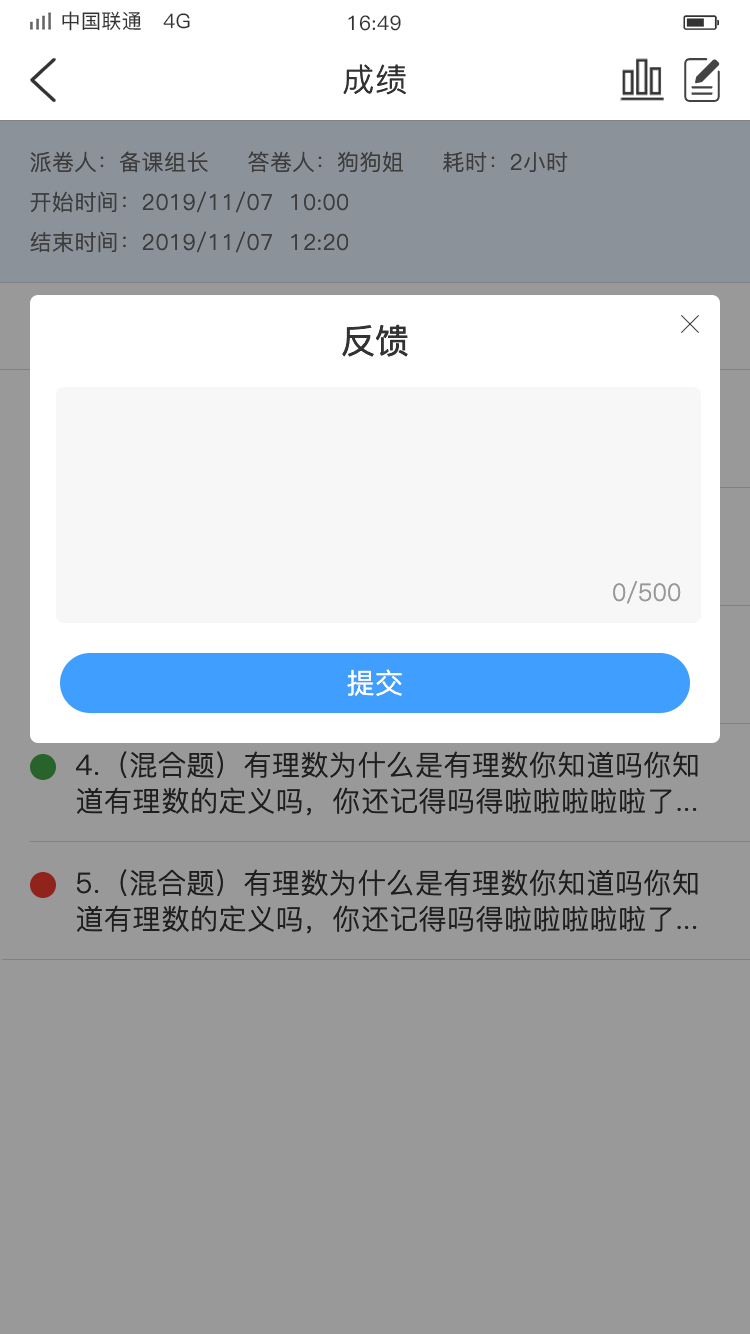
<style>
.page{position:relative;width:750px;height:1334px;background:#999999}
.page>*{position:absolute;margin:0}
.t1{font:20px "PingFang-SC-Medium";letter-spacing:0.02em;color:#333333}
.t2{font:32px "PingFang-SC-Regular";letter-spacing:0.02em;color:#333333}
.t3{font:22px "PingFang-SC-Regular";letter-spacing:0.02em;color:#3d3d3d}
.t4{font:34px "PingFang-SC-Medium";color:#333333}
.t5{font:24px "PingFang-SC-Regular";color:#999999}
.t6{font:28px "PingFang-SC-Regular";letter-spacing:0.02em;color:#ffffff}
.t7{font:28px/36px "PingFang-SC-Regular";letter-spacing:0.02em;color:#333333}
</style>
<div class="page">
<p class="t1" style="left:62px;top:11px;width:128px;height:20px">中国联通   4G</p>
<p class="t1" style="left:348px;top:15px;width:53px;height:16px">16:49</p>
<p class="t2" style="left:343px;top:64px;width:63px;height:31px">成绩</p>
<p class="t3" style="left:30px;top:151px;width:178px;height:22px">派卷人：备课组长</p>
<p class="t3" style="left:248px;top:151px;width:155px;height:22px">答卷人：狗狗姐</p>
<p class="t3" style="left:443px;top:151px;width:125px;height:22px">耗时：2小时</p>
<p class="t3" style="left:30px;top:191px;width:319px;height:22px">开始时间：2019/11/07  10:00</p>
<p class="t3" style="left:30px;top:231px;width:319px;height:22px">结束时间：2019/11/07  12:20</p>
<p class="t4" style="left:342px;top:324px;width:66px;height:33px">反馈</p>
<p class="t5" style="left:613px;top:581px;width:68px;height:23px">0/500</p>
<p class="t6" style="left:347px;top:669px;width:55px;height:27px">提交</p>
<p class="t7" style="left:76px;top:751px;width:622px;height:65px">4.（混合题）有理数为什么是有理数你知道吗你知道有理数的定义吗，你还记得吗得啦啦啦啦啦了...</p>
<p class="t7" style="left:76px;top:869px;width:622px;height:65px">5.（混合题）有理数为什么是有理数你知道吗你知道有理数的定义吗，你还记得吗得啦啦啦啦啦了...</p>
</div>
